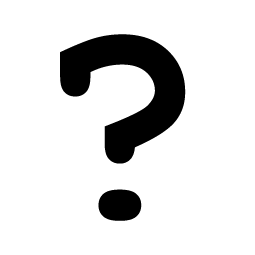
<style>
.page{position:relative;width:255px;height:255px;background:#ffffff}
.page>*{position:absolute;margin:0}
.t1{font:300px "CourierNewPS-BoldMT";color:#000000}
</style>
<div class="page">
<p class="t1" style="left:60px;top:34px;width:126px;height:187px">?</p>
</div>
